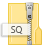
<style>
.page{position:relative;width:48px;height:48px;background:#ffffff}
.page>*{position:absolute;margin:0}
.t1{font:9px "SegoeUI";color:#64635e}
</style>
<div class="page">
<p class="t1" style="left:11px;top:26px;width:12px;height:8px">SQ</p>
</div>
